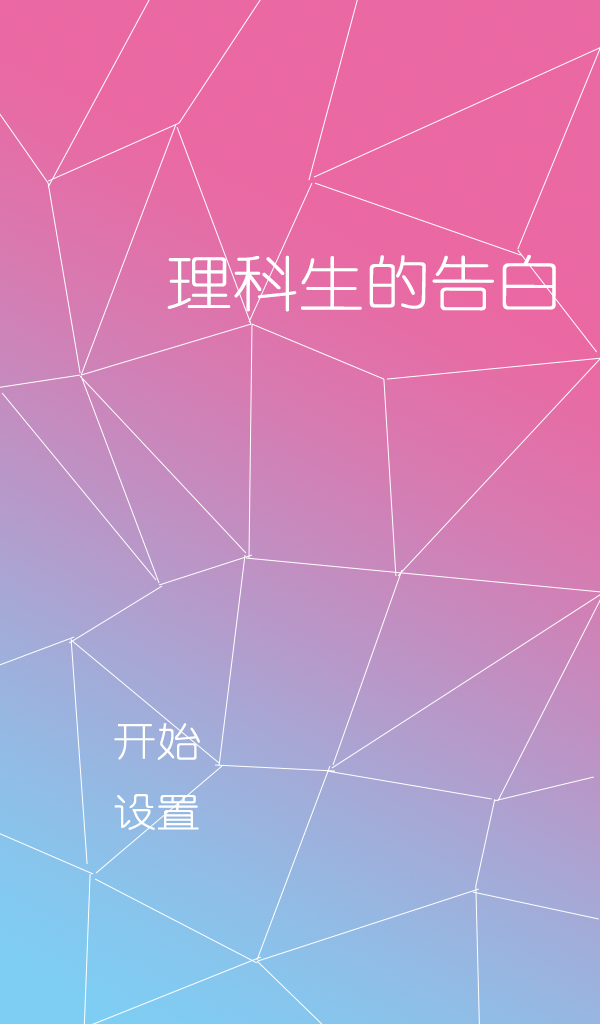
<style>
.page{position:relative;width:600px;height:1024px}
.page>*{position:absolute;margin:0}
.t1{font:60px "YouYuan";color:#ffffff;scale:1.1 1}
.t2{font:40px "YouYuan";color:#ffffff;scale:1.1 1}
</style>
<div class="page">
<p class="t1" style="left:167px;top:254px;width:389px;height:58px">理科生的告白</p>
<p class="t2" style="left:114px;top:723px;width:86px;height:37px">开始</p>
<p class="t2" style="left:114px;top:794px;width:85px;height:36px">设置</p>
</div>
